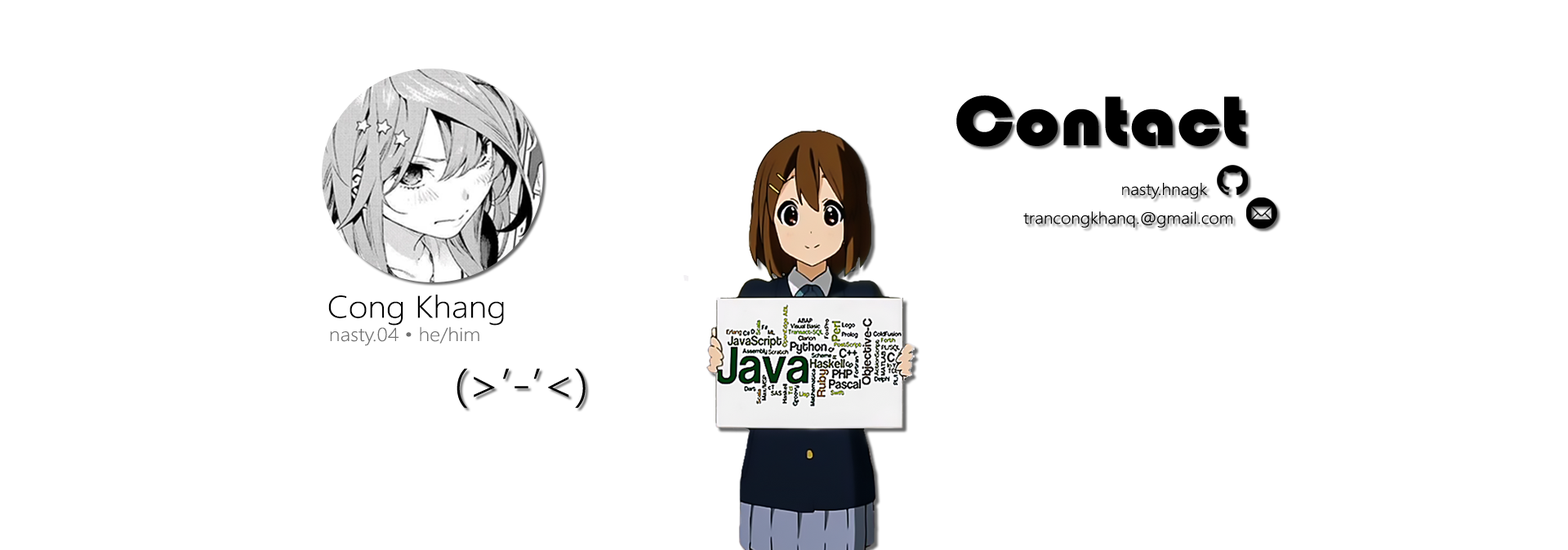
<style>
.page{position:relative;width:1568px;height:550px;background:#ffffff}
.page>*{position:absolute;margin:0}
.t1{font:72.6px "Bauhaus93";letter-spacing:0.002em;color:#000000;scale:1.1 1}
.t2{font:16.1px "SegoeUI-Light";letter-spacing:0.002em;color:#000000;scale:1.1 1}
.t3{font:31.2px "SegoeUI-Light";letter-spacing:0.002em;color:#000000;scale:1.1 1}
.t4{font:18.9px "SegoeUI-Light";letter-spacing:0.002em;color:#717171;scale:1.1 1}
.t5{font:45.5px "SegoeUI-Light";letter-spacing:0.002em;color:#000000;scale:1.1 1}
</style>
<div class="page">
<p class="t1" style="left:956px;top:96px;width:290px;height:51px">Contact</p>
<p class="t2" style="left:1122px;top:183px;width:86px;height:16px">nasty.hnagk</p>
<p class="t2" style="left:1023px;top:212px;width:209px;height:16px">trancongkhanq.@gmail.com</p>
<p class="t3" style="left:328px;top:295px;width:176px;height:31px">Cong Khang</p>
<p class="t4" style="left:330px;top:327px;width:149px;height:19px">nasty.04 • he/him</p>
<p class="t5" style="left:457px;top:368px;width:129px;height:40px">(&gt;’-’&lt;)</p>
</div>
